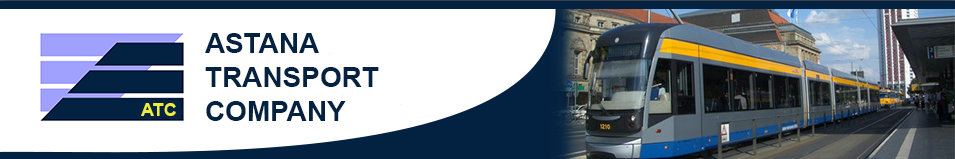
<style>
.page{position:relative;width:955px;height:159px;background:#ffffff}
.page>*{position:absolute;margin:0}
.t1{font:28px "Arial-BoldMT";color:#032241}
.t2{font:18px "Arial-BoldMT";color:#eeec3d}
</style>
<div class="page">
<p class="t1" style="left:205px;top:33px;width:174px;height:88px">ASTANA<br>TRANSPORT<br>COMPANY</p>
<p class="t2" style="left:141px;top:103px;width:35px;height:13px">ATC</p>
</div>
